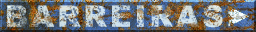
<style>
.page{position:relative;width:256px;height:32px}
.page>*{position:absolute;margin:0}
.t1{font:29.3px "Arial-Black";letter-spacing:0.12em;text-transform:uppercase}
</style>
<div class="page">
<p class="t1" style="left:7px;top:5px;width:216px;height:23px">BARREIRAs</p>
</div>
